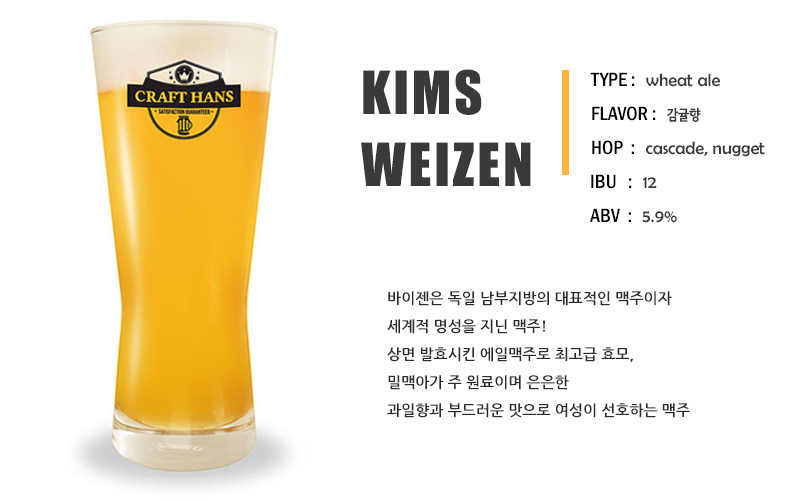
<style>
.page{position:relative;width:800px;height:500px;background:#ffffff}
.page>*{position:absolute;margin:0}
.t1{font:55px/72px "Impact";letter-spacing:0.05em;color:#3a3a3a}
.t2{font:18px "BerlinSansFB-Reg";color:#3a3a3a}
.t3{font:20px "FranklinGothic-MediumCond";color:#000000}
.t4{font:14px "SeN-CBL";color:#3a3a3a}
.t5{font:15px/28px "NanumGothicBold";color:#2b2b2b}
</style>
<div class="page">
<p class="t1" style="left:361px;top:69px;width:170px;height:117px">KIMS<br>WEIZEN</p>
<p class="t2" style="left:590px;top:72px;width:130px;height:15px"><span class="t3">TYPE :  </span>wheat ale</p>
<p class="t3" style="left:592px;top:106px;width:109px;height:16px">FLAVOR :  <span class="t4">감귤향</span></p>
<p class="t2" style="left:592px;top:140px;width:173px;height:17px"><span class="t3">HOP  :  </span>cascade, nugget</p>
<p class="t3" style="left:591px;top:174px;width:66px;height:15px">IBU   :  <span class="t2">12</span></p>
<p class="t3" style="left:590px;top:208px;width:87px;height:15px">ABV  :  <span class="t2">5.9%</span></p>
<p class="t5" style="left:387px;top:291px;width:303px;height:127px">바이젠은 독일 남부지방의 대표적인 맥주이자 <br>세계적 명성을 지닌 맥주!<br>상면 발효시킨 에일맥주로 최고급 효모, <br>밀맥아가 주 원료이며 은은한<br>과일향과 부드러운 맛으로 여성이 선호하는 맥주</p>
</div>
